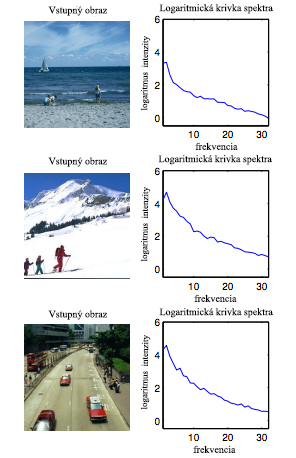
<style>
.page{position:relative;width:296px;height:458px;background:#ffffff}
.page>*{position:absolute;margin:0}
.t1{font:10px "TimesNewRomanPSMT";color:#000000}
.t2{font:9px "TimesNewRomanPSMT";color:#000000}
</style>
<div class="page">
<p class="t1" style="left:48px;top:6px;width:59px;height:10px">Vstupný obraz</p>
<p class="t1" style="left:159px;top:4px;width:114px;height:10px">Logaritmická krivka spektra</p>
<p class="t2" style="left:140px;top:36px;width:11px;height:75px;rotate:-89deg">logaritmus  intenzity</p>
<p class="t1" style="left:195px;top:142px;width:43px;height:8px">frekvencia</p>
<p class="t1" style="left:48px;top:157px;width:59px;height:10px">Vstupný obraz</p>
<p class="t1" style="left:158px;top:155px;width:114px;height:10px">Logaritmická krivka spektra</p>
<p class="t2" style="left:140px;top:187px;width:11px;height:75px;rotate:-89deg">logaritmus  intenzity</p>
<p class="t1" style="left:194px;top:294px;width:43px;height:8px">frekvencia</p>
<p class="t1" style="left:48px;top:310px;width:59px;height:10px">Vstupný obraz</p>
<p class="t1" style="left:159px;top:308px;width:114px;height:10px">Logaritmická krivka spektra</p>
<p class="t2" style="left:140px;top:335px;width:11px;height:75px;rotate:-89deg">logaritmus  intenzity</p>
<p class="t1" style="left:193px;top:445px;width:43px;height:8px">frekvencia</p>
</div>
